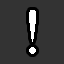
<style>
.page{position:relative;width:64px;height:64px;background:#333333}
.page>*{position:absolute;margin:0}
.t1{font:64px "OpenSymbol";color:#ffffff}
</style>
<div class="page">
<p class="t1" style="left:29px;top:10px;width:7px;height:44px">!</p>
</div>
